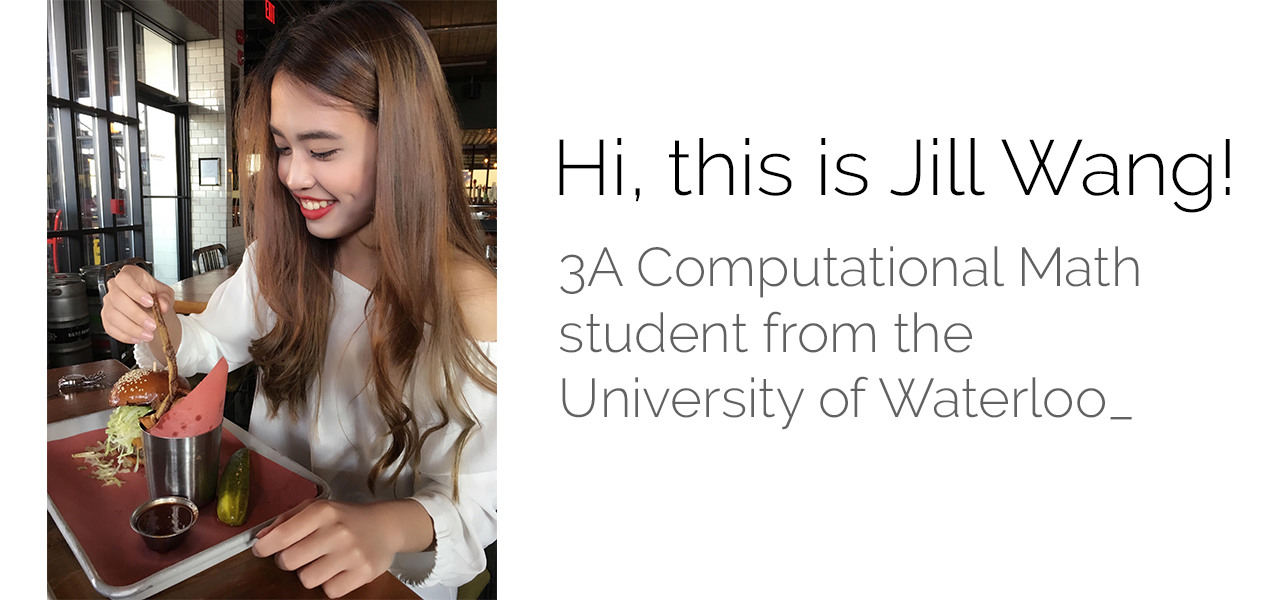
<style>
.page{position:relative;width:1280px;height:600px;background:#ffffff}
.page>*{position:absolute;margin:0}
.t1{font:18.8px "Raleway-Light";color:#000000}
.t2{font:13.1px "Raleway-Light";color:#616161}
</style>
<div class="page">
<p class="t1" style="left:559px;top:138px;width:671px;height:75px">Hi, this is Jill Wang!</p>
<p class="t2" style="left:559px;top:246px;width:580px;height:184px">3A Computational Math<br>student from the <br>University of Waterloo_</p>
</div>
